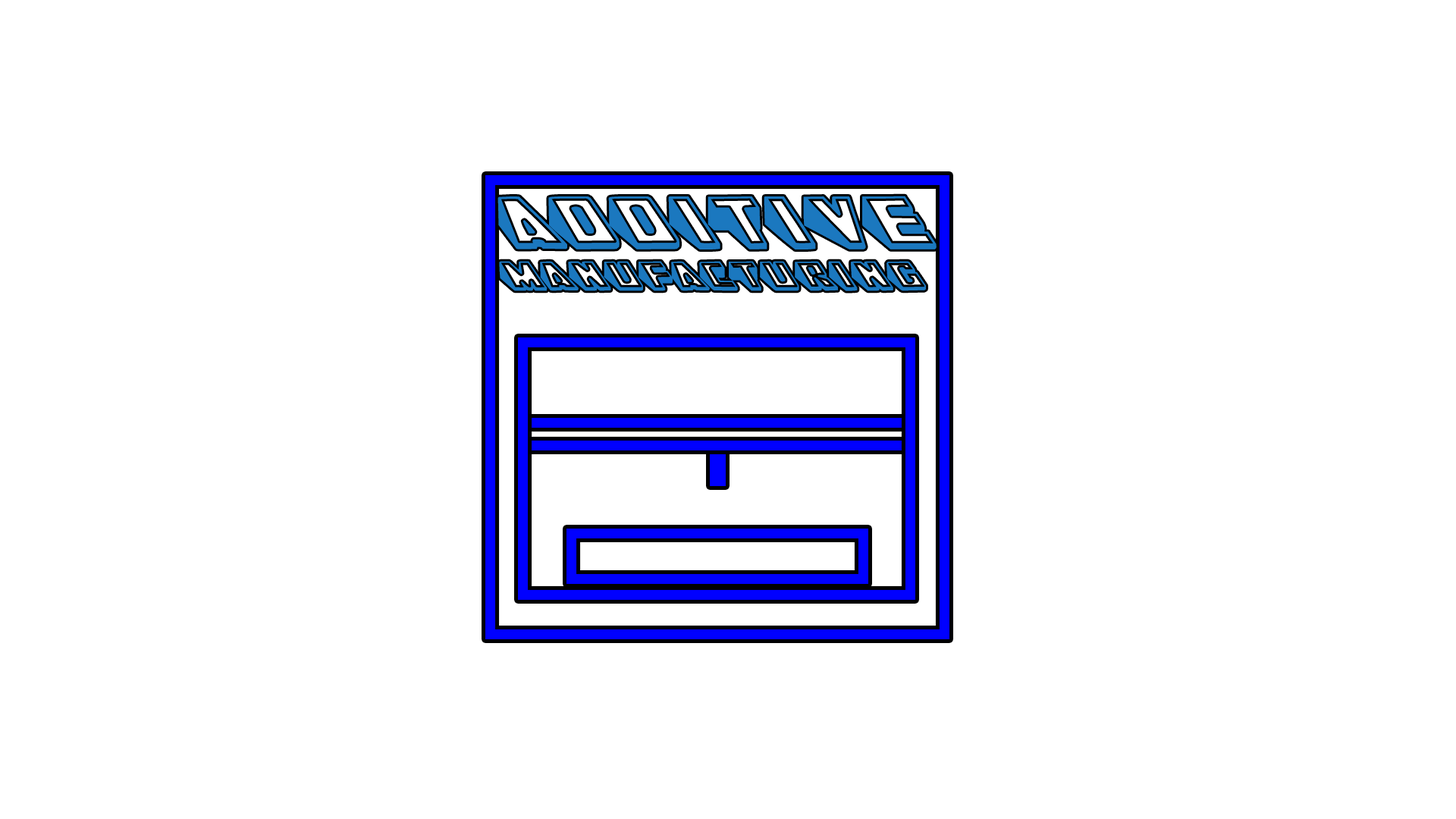
<style>
.page{position:relative;width:1456px;height:819px;background:#ffffff}
.page>*{position:absolute;margin:0}
.t1{font:33.8px/41.7px "Wedgie-Regular";color:#1b78bf;text-transform:uppercase;font-weight:bold}
.t2{font:61.4px/10.6px "Wedgie-Regular";color:#1b78bf;text-transform:uppercase;font-weight:bold}
</style>
<div class="page">
<p class="t1" style="left:497px;top:196px;width:440px;height:95px;text-align:center"><span class="t2">additive<br></span>manufacturing</p>
</div>
